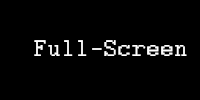
<style>
.page{position:relative;width:200px;height:100px;background:#000000}
.page>*{position:absolute;margin:0}
.t1{font:25px "Courier";color:#ffffff}
</style>
<div class="page">
<p class="t1" style="left:34px;top:40px;width:153px;height:16px">Full-Screen</p>
</div>
